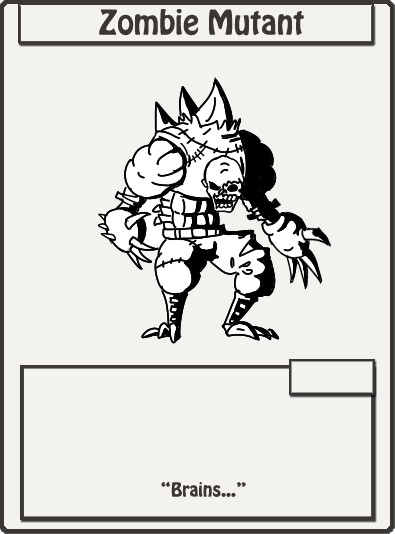
<style>
.page{position:relative;width:395px;height:534px;background:#f3f2ee}
.page>*{position:absolute;margin:0}
.t1{font:30px "HoboStd";color:#3b3634}
.t2{font:17px "HoboStd";color:#3b3634}
</style>
<div class="page">
<p class="t1" style="left:99px;top:9px;width:205px;height:27px">Zombie Mutant</p>
<p class="t2" style="left:161px;top:482px;width:85px;height:15px">“Brains...”</p>
</div>
